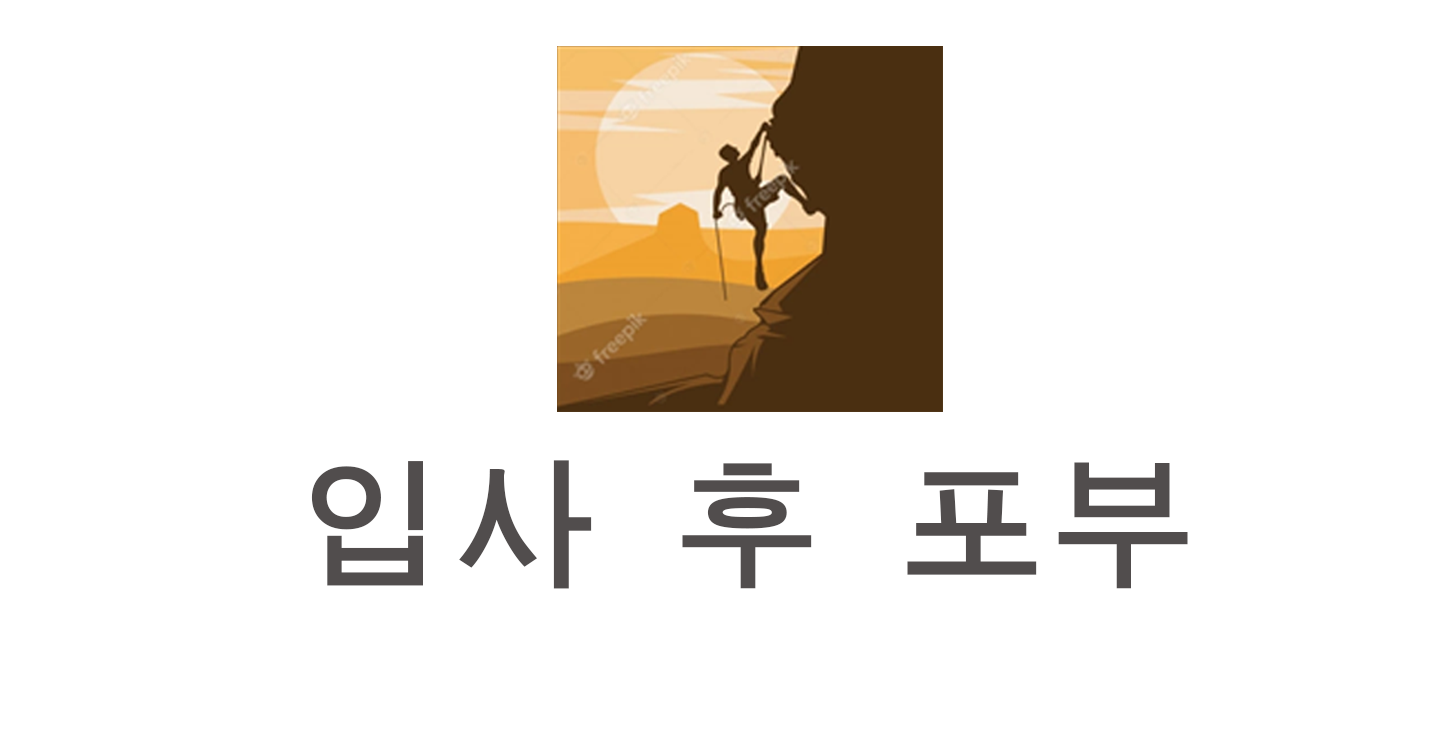
<style>
.page{position:relative;width:1440px;height:749px;background:#ffffff}
.page>*{position:absolute;margin:0}
.t1{font:150px "MJemokGothic";color:#514d4d}
</style>
<div class="page">
<p class="t1" style="left:311px;top:460px;width:877px;height:129px">입사 후 포부</p>
</div>
